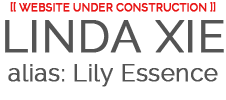
<style>
.page{position:relative;width:226px;height:100px;background:#ffffff}
.page>*{position:absolute;margin:0}
.t1{font:11px "Raleway";color:#e81515;font-weight:bold}
.t2{font:24px "Raleway";color:#545454;font-weight:bold}
.t3{font:45px "Raleway";color:#545454;font-weight:bold}
</style>
<div class="page">
<p class="t1" style="left:10px;top:2px;width:206px;height:10px">[[ WEBSITE UNDER CONSTRUCTION ]]</p>
<p class="t2" style="left:5px;top:20px;width:219px;height:67px;text-align:justify"><span class="t3">LINDA XIE<br></span>alias: Lily Essence</p>
</div>
